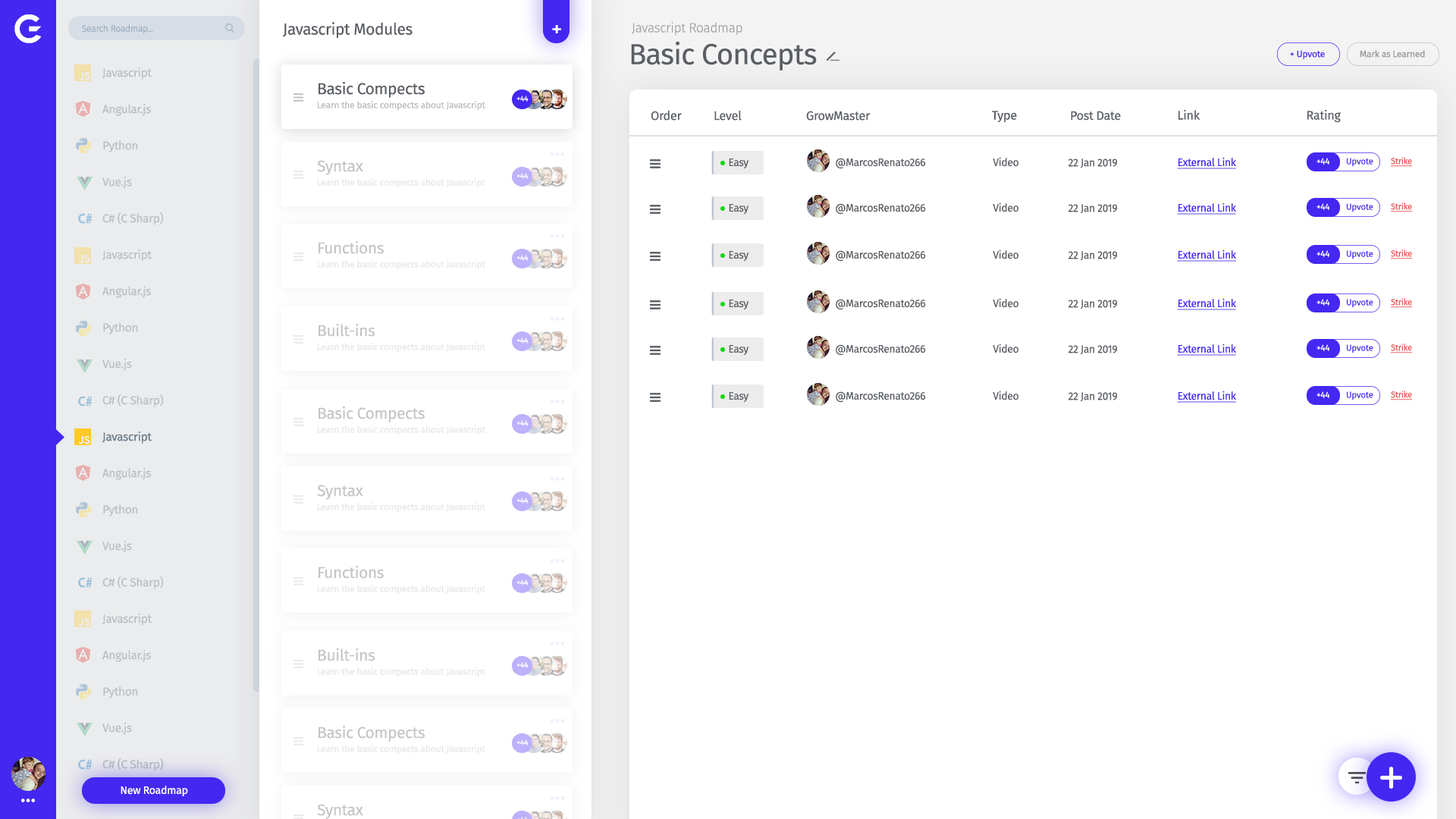
<style>
.page{position:relative;width:1456px;height:819px;background:#ffffff}
.page>*{position:absolute;margin:0}
.t1{font:35.7px "Anurati-Regular";letter-spacing:-0.022em;color:#ffffff}
.t2{font:9.2px "FiraSans-Light";letter-spacing:-0.022em;color:#90a5ba}
.t3{font:16px "FiraSans-Regular";letter-spacing:-0.022em;color:#5b5f64}
.t4{font:22px "FiraSans-Regular";letter-spacing:-0.022em;color:#ffffff}
.t5{font:13.2px "FiraSans-Light";letter-spacing:-0.022em;color:#a1a1a1}
.t6{font:29.1px "FiraSans-Regular";letter-spacing:-0.022em;color:#5b5f64}
.t7{font:9.2px "FiraSans-Regular";letter-spacing:-0.022em;color:#4427f1}
.t8{font:9.2px "FiraSans-Regular";letter-spacing:-0.022em;color:#96999d}
.t9{font:11.7px/36.4px "FiraSans-Regular";letter-spacing:-0.022em;color:#b9c0c6}
.t10{font:15.8px "FiraSans-Regular";letter-spacing:-0.022em;color:#5b5f64}
.t11{font:9.1px "FiraSans-Regular";letter-spacing:-0.022em;color:#bbbcbd}
.t12{font:7.4px "FiraSans-Regular";letter-spacing:-0.022em;color:#ffffff}
.t13{font:12.4px "FiraSans-Regular";letter-spacing:-0.022em;color:#5b5f64}
.t14{font:12.3px "FiraSans-Regular";letter-spacing:-0.022em;color:#5b5f64}
.t15{font:15.8px "FiraSans-Regular";letter-spacing:-0.022em;color:#c4c5c7}
.t16{font:10.9px "FiraSans-Regular";letter-spacing:-0.022em;color:#5b5f64;scale:0.96 1}
.t17{font:10.9px "FiraSans-Regular";letter-spacing:-0.022em;color:#4427f1;text-decoration:underline;scale:0.96 1}
.t18{font:8.8px "FiraSans-Regular";letter-spacing:-0.022em;color:#ffffff}
.t19{font:8.8px "FiraSans-Regular";letter-spacing:-0.022em;color:#4427f1}
.t20{font:8.8px "FiraSans-Regular";letter-spacing:-0.022em;color:#ee5252;text-decoration:underline;scale:0.97 1}
.t21{font:9.1px "FiraSans-Regular";letter-spacing:-0.022em;color:#e6e7e7}
.t22{font:11.7px "FiraSans-Regular";letter-spacing:-0.022em;color:#738393}
.t23{font:10.7px "FiraSans-Regular";letter-spacing:-0.022em;color:#ffffff}
</style>
<div class="page">
<p class="t1" style="left:14px;top:14px;width:28px;height:29px">G</p>
<p class="t2" style="left:82px;top:24px;width:71px;height:10px">Search Roadmap...</p>
<p class="t3" style="left:283px;top:22px;width:130px;height:17px">Javascript Modules</p>
<p class="t4" style="left:552px;top:25px;width:9px;height:8px">+</p>
<p class="t5" style="left:632px;top:22px;width:110px;height:14px">Javascript Roadmap</p>
<p class="t6" style="left:631px;top:41px;width:186px;height:30px">Basic Concepts</p>
<p class="t7" style="left:1290px;top:50px;width:35px;height:9px">+ Upvote</p>
<p class="t8" style="left:1360px;top:50px;width:65px;height:8px">Mark as Learned</p>
<p class="t9" style="left:102px;top:67px;width:62px;height:704px">Javascript<br>Angular.js<br>Python<br>Vue.js<br>C# (C Sharp)<br>Javascript<br>Angular.js<br>Python<br>Vue.js<br>C# (C Sharp)<br>Javascript<br>Angular.js<br>Python<br>Vue.js<br>C# (C Sharp)<br>Javascript<br>Angular.js<br>Python<br>Vue.js<br>C# (C Sharp)</p>
<p class="t10" style="left:318px;top:81px;width:107px;height:17px">Basic Compects</p>
<p class="t11" style="left:318px;top:101px;width:167px;height:10px">Learn the basic compects about Javascript</p>
<p class="t12" style="left:516px;top:96px;width:13px;height:6px">+44</p>
<p class="t13" style="left:651px;top:110px;width:31px;height:11px">Order</p>
<p class="t13" style="left:714px;top:110px;width:28px;height:11px">Level</p>
<p class="t13" style="left:806px;top:111px;width:65px;height:10px">GrowMaster</p>
<p class="t14" style="left:992px;top:111px;width:25px;height:12px">Type</p>
<p class="t14" style="left:1071px;top:111px;width:50px;height:10px">Post Date</p>
<p class="t14" style="left:1178px;top:109px;width:22px;height:11px">Link</p>
<p class="t14" style="left:1307px;top:109px;width:34px;height:14px">Rating</p>
<p class="t15" style="left:317px;top:160px;width:46px;height:15px">Syntax</p>
<p class="t16" style="left:729px;top:158px;width:20px;height:11px">Easy</p>
<p class="t16" style="left:836px;top:158px;width:90px;height:11px">@MarcosRenato266</p>
<p class="t16" style="left:993px;top:157px;width:25px;height:10px">Video</p>
<p class="t16" style="left:1068px;top:158px;width:49px;height:10px">22 Jan 2019</p>
<p class="t17" style="left:1177px;top:157px;width:59px;height:12px">External Link</p>
<p class="t18" style="left:1316px;top:158px;width:14px;height:7px">+44</p>
<p class="t19" style="left:1347px;top:158px;width:26px;height:9px">Upvote</p>
<p class="t20" style="left:1391px;top:157px;width:22px;height:10px">Strike</p>
<p class="t12" style="left:516px;top:173px;width:13px;height:6px">+44</p>
<p class="t21" style="left:318px;top:178px;width:167px;height:10px">Learn the basic compects about Javascript</p>
<p class="t16" style="left:729px;top:204px;width:20px;height:11px">Easy</p>
<p class="t16" style="left:836px;top:203px;width:90px;height:12px">@MarcosRenato266</p>
<p class="t16" style="left:993px;top:202px;width:25px;height:10px">Video</p>
<p class="t16" style="left:1068px;top:204px;width:49px;height:10px">22 Jan 2019</p>
<p class="t17" style="left:1177px;top:202px;width:59px;height:13px">External Link</p>
<p class="t18" style="left:1316px;top:203px;width:14px;height:7px">+44</p>
<p class="t19" style="left:1347px;top:203px;width:26px;height:9px">Upvote</p>
<p class="t20" style="left:1391px;top:202px;width:22px;height:10px">Strike</p>
<p class="t15" style="left:318px;top:240px;width:66px;height:14px">Functions</p>
<p class="t12" style="left:516px;top:255px;width:13px;height:6px">+44</p>
<p class="t16" style="left:729px;top:251px;width:20px;height:11px">Easy</p>
<p class="t16" style="left:836px;top:250px;width:90px;height:12px">@MarcosRenato266</p>
<p class="t16" style="left:993px;top:249px;width:25px;height:10px">Video</p>
<p class="t16" style="left:1068px;top:251px;width:49px;height:10px">22 Jan 2019</p>
<p class="t17" style="left:1177px;top:249px;width:59px;height:13px">External Link</p>
<p class="t18" style="left:1316px;top:250px;width:14px;height:7px">+44</p>
<p class="t19" style="left:1347px;top:250px;width:26px;height:9px">Upvote</p>
<p class="t20" style="left:1391px;top:249px;width:22px;height:10px">Strike</p>
<p class="t21" style="left:318px;top:260px;width:167px;height:10px">Learn the basic compects about Javascript</p>
<p class="t16" style="left:729px;top:300px;width:20px;height:10px">Easy</p>
<p class="t16" style="left:836px;top:299px;width:90px;height:11px">@MarcosRenato266</p>
<p class="t16" style="left:993px;top:298px;width:25px;height:10px">Video</p>
<p class="t16" style="left:1068px;top:300px;width:49px;height:9px">22 Jan 2019</p>
<p class="t17" style="left:1177px;top:298px;width:59px;height:12px">External Link</p>
<p class="t18" style="left:1316px;top:299px;width:14px;height:7px">+44</p>
<p class="t19" style="left:1347px;top:299px;width:26px;height:9px">Upvote</p>
<p class="t20" style="left:1391px;top:298px;width:22px;height:10px">Strike</p>
<p class="t15" style="left:318px;top:323px;width:57px;height:14px">Built-ins</p>
<p class="t12" style="left:516px;top:337px;width:13px;height:7px">+44</p>
<p class="t21" style="left:318px;top:343px;width:167px;height:10px">Learn the basic compects about Javascript</p>
<p class="t16" style="left:729px;top:345px;width:20px;height:11px">Easy</p>
<p class="t16" style="left:836px;top:344px;width:90px;height:12px">@MarcosRenato266</p>
<p class="t16" style="left:993px;top:344px;width:25px;height:9px">Video</p>
<p class="t16" style="left:1068px;top:345px;width:49px;height:10px">22 Jan 2019</p>
<p class="t17" style="left:1177px;top:344px;width:59px;height:12px">External Link</p>
<p class="t18" style="left:1316px;top:344px;width:14px;height:7px">+44</p>
<p class="t19" style="left:1347px;top:344px;width:26px;height:9px">Upvote</p>
<p class="t20" style="left:1391px;top:344px;width:22px;height:9px">Strike</p>
<p class="t16" style="left:729px;top:392px;width:20px;height:11px">Easy</p>
<p class="t16" style="left:836px;top:391px;width:90px;height:12px">@MarcosRenato266</p>
<p class="t16" style="left:993px;top:391px;width:25px;height:9px">Video</p>
<p class="t16" style="left:1068px;top:392px;width:49px;height:10px">22 Jan 2019</p>
<p class="t17" style="left:1177px;top:391px;width:59px;height:12px">External Link</p>
<p class="t18" style="left:1316px;top:391px;width:14px;height:7px">+44</p>
<p class="t19" style="left:1347px;top:391px;width:26px;height:9px">Upvote</p>
<p class="t20" style="left:1391px;top:391px;width:22px;height:9px">Strike</p>
<p class="t15" style="left:318px;top:406px;width:107px;height:16px">Basic Compects</p>
<p class="t21" style="left:318px;top:425px;width:167px;height:10px">Learn the basic compects about Javascript</p>
<p class="t12" style="left:516px;top:420px;width:13px;height:6px">+44</p>
<p class="t22" style="left:102px;top:431px;width:50px;height:13px">Javascript</p>
<p class="t15" style="left:317px;top:485px;width:46px;height:15px">Syntax</p>
<p class="t12" style="left:516px;top:497px;width:13px;height:7px">+44</p>
<p class="t21" style="left:318px;top:503px;width:167px;height:10px">Learn the basic compects about Javascript</p>
<p class="t15" style="left:318px;top:565px;width:66px;height:14px">Functions</p>
<p class="t12" style="left:516px;top:579px;width:13px;height:6px">+44</p>
<p class="t21" style="left:318px;top:585px;width:167px;height:10px">Learn the basic compects about Javascript</p>
<p class="t15" style="left:318px;top:648px;width:57px;height:13px">Built-ins</p>
<p class="t12" style="left:516px;top:662px;width:13px;height:6px">+44</p>
<p class="t21" style="left:318px;top:667px;width:167px;height:10px">Learn the basic compects about Javascript</p>
<p class="t15" style="left:318px;top:725px;width:107px;height:17px">Basic Compects</p>
<p class="t21" style="left:318px;top:745px;width:167px;height:10px">Learn the basic compects about Javascript</p>
<p class="t12" style="left:516px;top:739px;width:13px;height:6px">+44</p>
<p class="t23" style="left:121px;top:786px;width:67px;height:10px">New Roadmap</p>
<p class="t15" style="left:317px;top:804px;width:46px;height:15px">Syntax</p>
</div>
